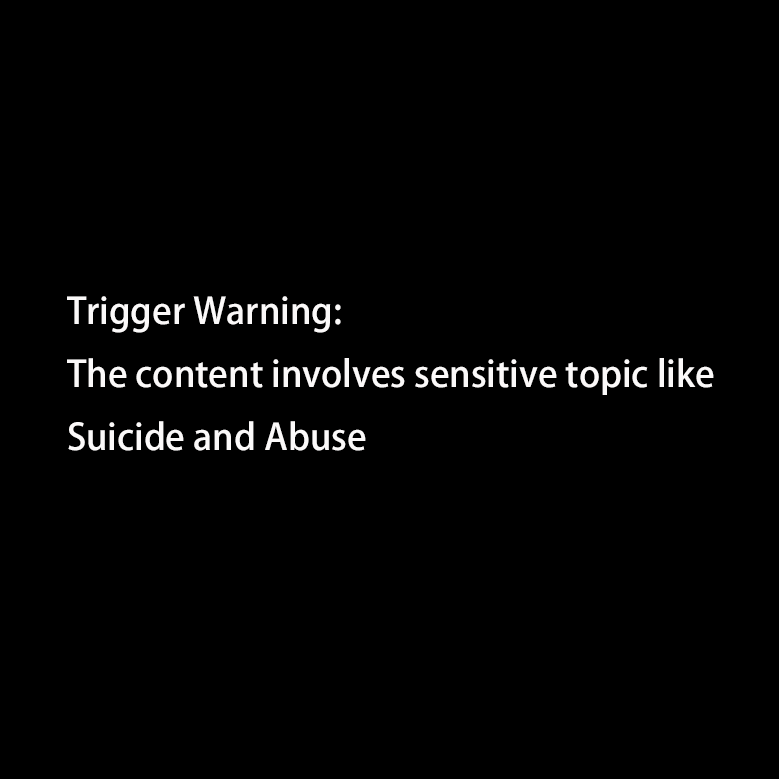
<style>
.page{position:relative;width:779px;height:779px;background:#000000}
.page>*{position:absolute;margin:0}
.t1{font:36px "AdobeFanHeitiStd-Bold";color:#fbf9f9}
</style>
<div class="page">
<p class="t1" style="left:67px;top:296px;width:647px;height:155px">Trigger Warning:<br>The content involves sensitive topic like<br>Suicide and Abuse</p>
</div>
